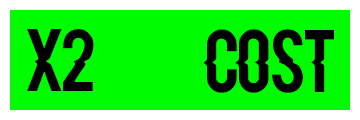
<style>
.page{position:relative;width:360px;height:120px;background:#00fc00}
.page>*{position:absolute;margin:0}
.t1{font:60px "Blacklisted";color:#000000}
</style>
<div class="page">
<p class="t1" style="left:27px;top:29px;width:67px;height:62px">X2</p>
<p class="t1" style="left:203px;top:29px;width:131px;height:64px">Cost</p>
</div>
